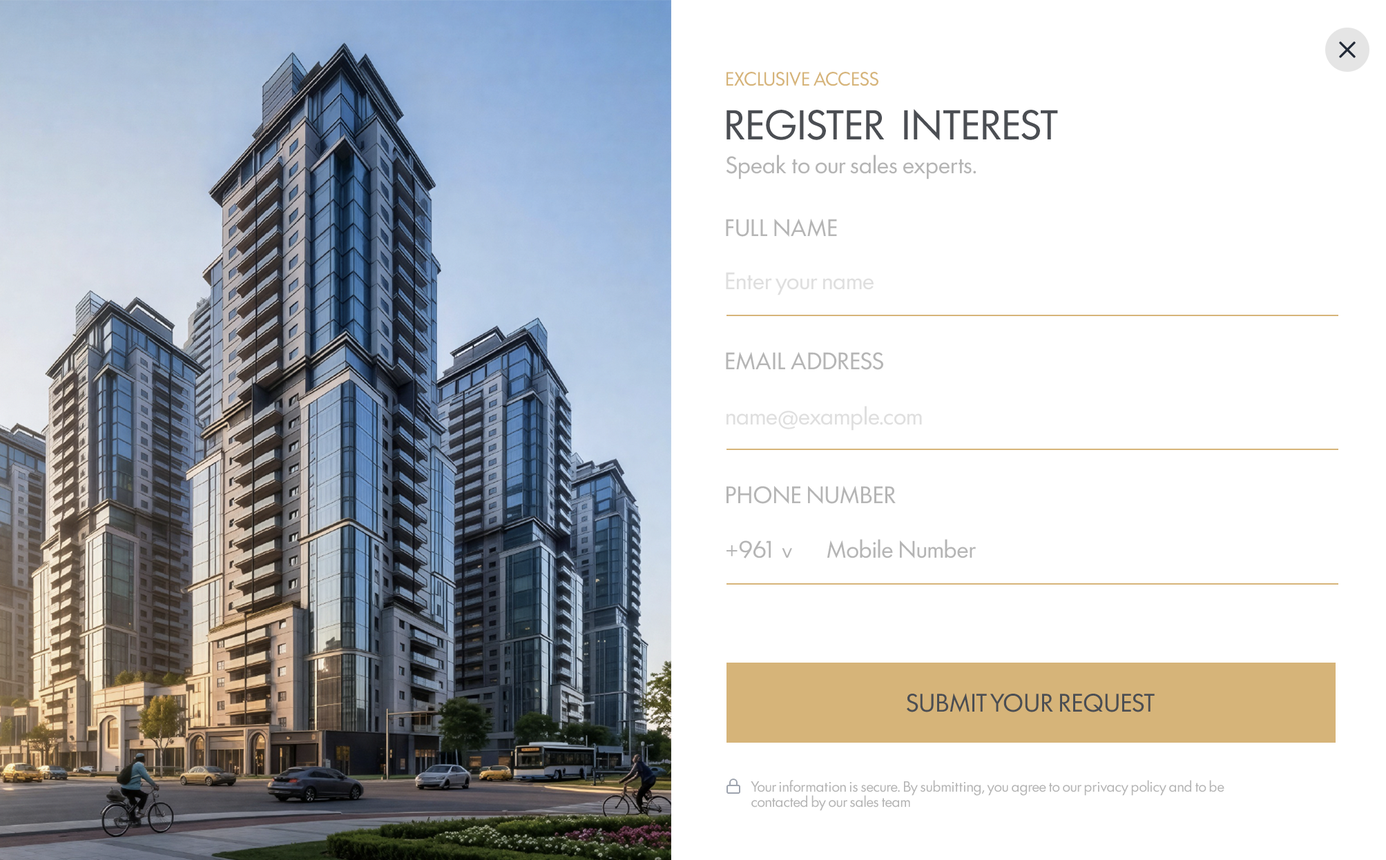
<style>
.page{position:relative;width:1386px;height:860px;background:#ffffff}
.page>*{position:absolute;margin:0}
.t1{font:18px "Futura100-Regular";color:#d6b479;text-transform:uppercase}
.t2{font:38.7px "Futura100-Regular";color:#4b4e53;text-transform:uppercase}
.t3{font:22.1px "Futura100-Regular";color:#b5b5b5}
.t4{font:22.1px "Futura100-Regular";color:#dfdfdf}
.t5{font:18px "Montserrat-Medium";color:#b5b5b5}
.t6{font:23.5px "Futura100-Regular";color:#4b4e53;text-transform:uppercase}
.t7{font:13.8px/15.2px "Futura100-Regular";color:#b5b5b5}
</style>
<div class="page">
<p class="t1" style="left:726px;top:71px;width:152px;height:15px">EXCLUSIVE ACCESS</p>
<p class="t2" style="left:726px;top:109px;width:332px;height:32px">Register  INTEREST</p>
<p class="t3" style="left:726px;top:155px;width:250px;height:25px">Speak to our sales experts.</p>
<p class="t3" style="left:726px;top:219px;width:111px;height:18px">FULL NAME</p>
<p class="t4" style="left:726px;top:272px;width:148px;height:24px">Enter your name</p>
<p class="t3" style="left:726px;top:352px;width:157px;height:18px">EMAIL ADDRESS</p>
<p class="t4" style="left:726px;top:406px;width:196px;height:25px">name@example.com</p>
<p class="t3" style="left:726px;top:486px;width:170px;height:18px">PHONE NUMBER</p>
<p class="t3" style="left:726px;top:539px;width:250px;height:20px">+961  <span class="t5">v</span>       Mobile Number</p>
<p class="t6" style="left:907px;top:693px;width:248px;height:20px">SUBMIT YOUR REQUEST</p>
<p class="t7" style="left:751px;top:780px;width:473px;height:31px">Your information is secure. By submitting, you agree to our privacy policy and to be<br>contacted by our sales team</p>
</div>
